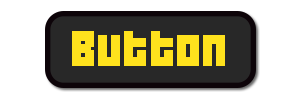
<style>
.page{position:relative;width:300px;height:100px;background:#ffffff}
.page>*{position:absolute;margin:0}
.t1{font:44px "04b19";letter-spacing:0.025em;color:#ffe21d}
</style>
<div class="page">
<p class="t1" style="left:72px;top:31px;width:153px;height:35px">Button</p>
</div>
